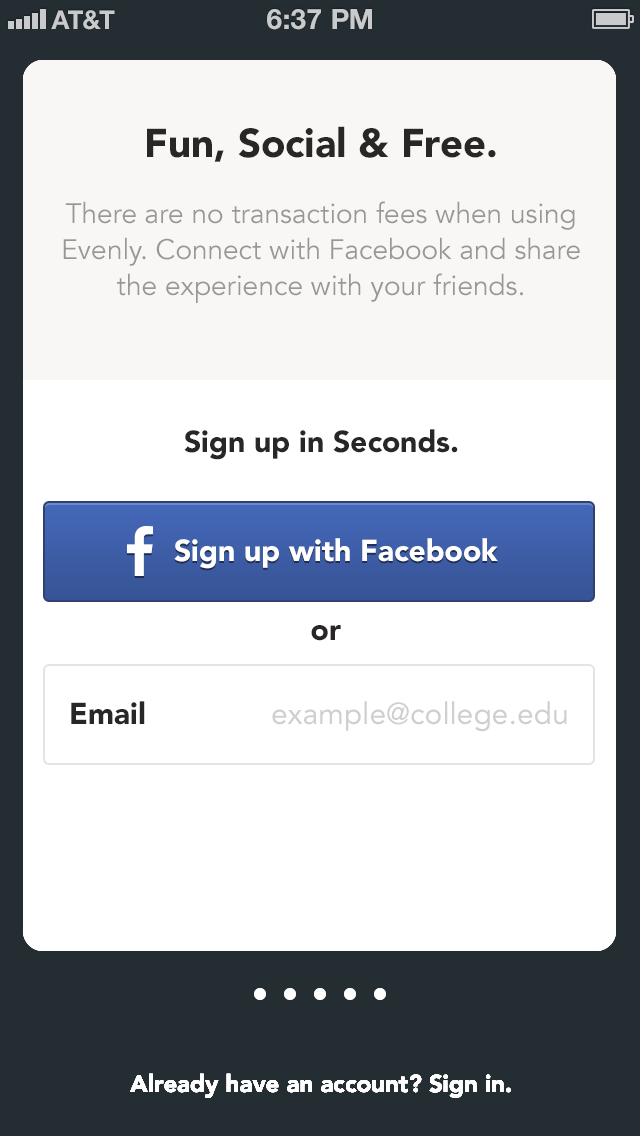
<style>
.page{position:relative;width:640px;height:1136px;background:#ffffff}
.page>*{position:absolute;margin:0}
.t1{font:40px "Avenir-Black";color:#282726}
.t2{font:28px/36px "Avenir-Book";color:#999694}
.t3{font:30px "Avenir-Black";color:#282726}
.t4{font:30px "Avenir-Black";color:#ffffff}
.t5{font:30px "Avenir-Roman";color:#d0cece}
.t6{font:24px "Avenir-Black";color:#ffffff}
</style>
<div class="page">
<p class="t1" style="left:147px;top:126px;width:349px;height:36px">Fun, Social &amp; Free.</p>
<p class="t2" style="left:63px;top:201px;width:517px;height:102px;text-align:center">There are no transaction fees when using Evenly. Connect with Facebook and share the experience with your friends.</p>
<p class="t3" style="left:184px;top:429px;width:274px;height:31px">Sign up in Seconds.</p>
<p class="t4" style="left:174px;top:538px;width:324px;height:31px">Sign up with Facebook</p>
<p class="t3" style="left:311px;top:625px;width:30px;height:16px">or</p>
<p class="t3" style="left:71px;top:701px;width:74px;height:24px">Email</p>
<p class="t5" style="left:272px;top:701px;width:295px;height:31px">example@college.edu</p>
<p class="t6" style="left:130px;top:1073px;width:381px;height:25px">Already have an account? Sign in.</p>
<p class="t6" style="left:130px;top:1073px;width:381px;height:25px">Already have an account? Sign in.</p>
<p class="t6" style="left:130px;top:1073px;width:381px;height:25px">Already have an account? Sign in.</p>
<p class="t6" style="left:130px;top:1073px;width:381px;height:25px">Already have an account? Sign in.</p>
<p class="t6" style="left:130px;top:1073px;width:381px;height:25px">Already have an account? Sign in.</p>
</div>
